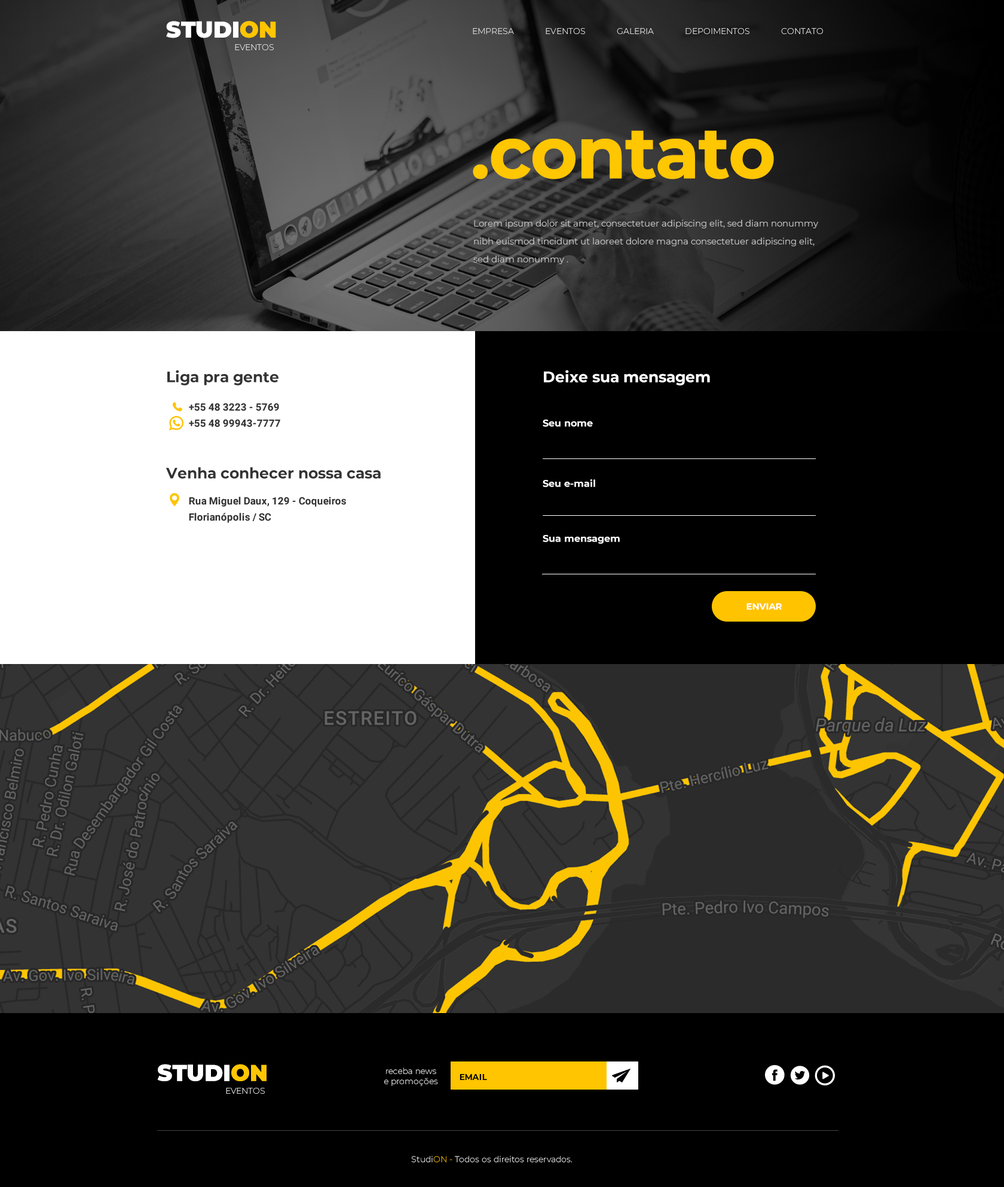
<style>
.page{position:relative;width:1004px;height:1187px;background:#000000}
.page>*{position:absolute;margin:0}
.t1{font:22.7px "Montserrat-Black";color:#ffffff}
.t2{font:22.7px "Montserrat-Black";color:#ffc500}
.t3{font:8.4px "Montserrat-Light";color:#ffffff}
.t4{font:71.7px "Montserrat-Bold";letter-spacing:-0.039em;color:#ffc602;font-weight:bold}
.t5{font:9px/17.9px "Montserrat-Regular";color:#cccccc}
.t6{font:14.9px "Montserrat-Bold";color:#333333}
.t7{font:14.9px "Montserrat-Bold";color:#fefefe}
.t8{font:10.2px/16.3px "Roboto-Bold";color:#333333}
.t9{font:9.6px "Montserrat-Bold";color:#fefefe}
.t10{font:9px "Montserrat-Bold";color:#ffffff}
.t11{font:22.9px "Montserrat-Black";color:#ffffff}
.t12{font:22.9px "Montserrat-Black";color:#ffc602}
.t13{font:8.4px/10.1px "Montserrat-Light";color:#ffffff}
.t14{font:8.4px "Montserrat-Bold";color:#000000}
.t15{font:8.4px "Montserrat-Light";color:#ffc602}
</style>
<div class="page">
<p class="t1" style="left:166px;top:21px;width:110px;height:17px">STUDI<span class="t2">ON</span></p>
<p class="t3" style="left:473px;top:28px;width:350px;height:6px">EMPRESA             EVENTOS             GALERIA             DEPOIMENTOS             CONTATO</p>
<p class="t3" style="left:235px;top:44px;width:39px;height:6px">EVENTOS</p>
<p class="t4" style="left:473px;top:130px;width:301px;height:49px">.contato</p>
<p class="t5" style="left:473px;top:219px;width:345px;height:45px">Lorem ipsum dolor sit amet, consectetuer adipiscing elit, sed diam nonummy nibh euismod tincidunt ut laoreet dolore magna consectetuer adipiscing elit, sed diam nonummy .</p>
<p class="t6" style="left:167px;top:370px;width:112px;height:16px">Liga pra gente</p>
<p class="t7" style="left:544px;top:370px;width:166px;height:16px">Deixe sua mensagem</p>
<p class="t8" style="left:189px;top:403px;width:91px;height:24px">+55 48 3223 - 5769<br>+55 48 99943-7777</p>
<p class="t9" style="left:543px;top:420px;width:50px;height:7px">Seu nome</p>
<p class="t6" style="left:166px;top:467px;width:215px;height:12px">Venha conhecer nossa casa</p>
<p class="t9" style="left:543px;top:479px;width:52px;height:8px">Seu e-mail</p>
<p class="t8" style="left:189px;top:497px;width:157px;height:26px">Rua Miguel Daux, 129 - Coqueiros Florianópolis / SC</p>
<p class="t9" style="left:543px;top:535px;width:77px;height:9px">Sua mensagem</p>
<p class="t10" style="left:747px;top:603px;width:35px;height:7px">ENVIAR</p>
<p class="t11" style="left:157px;top:1064px;width:110px;height:17px">STUDI<span class="t12">ON</span></p>
<p class="t13" style="left:384px;top:1068px;width:54px;height:18px;text-align:center">receba news<br>e promoções</p>
<p class="t14" style="left:460px;top:1074px;width:27px;height:6px">EMAIL</p>
<p class="t3" style="left:226px;top:1088px;width:39px;height:6px">EVENTOS</p>
<p class="t3" style="left:411px;top:1156px;width:161px;height:7px">Studi<span class="t15">ON - </span>Todos os direitos reservados.</p>
</div>
